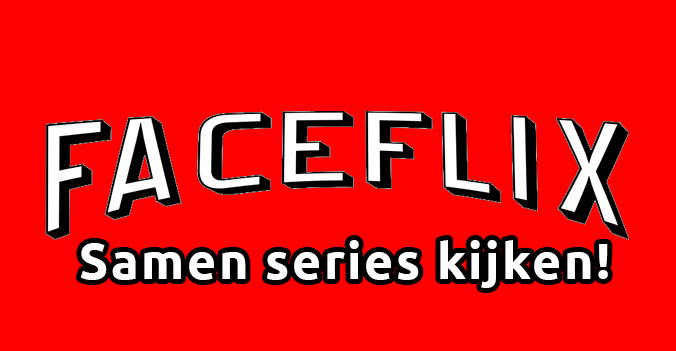
<style>
.page{position:relative;width:676px;height:351px;background:#ff0000}
.page>*{position:absolute;margin:0}
.t1{font:12px "Ubuntu-Bold";letter-spacing:0.05em;color:#ffffff}
</style>
<div class="page">
<p class="t1" style="left:80px;top:240px;width:528px;height:48px">Samen series kijken!</p>
</div>
